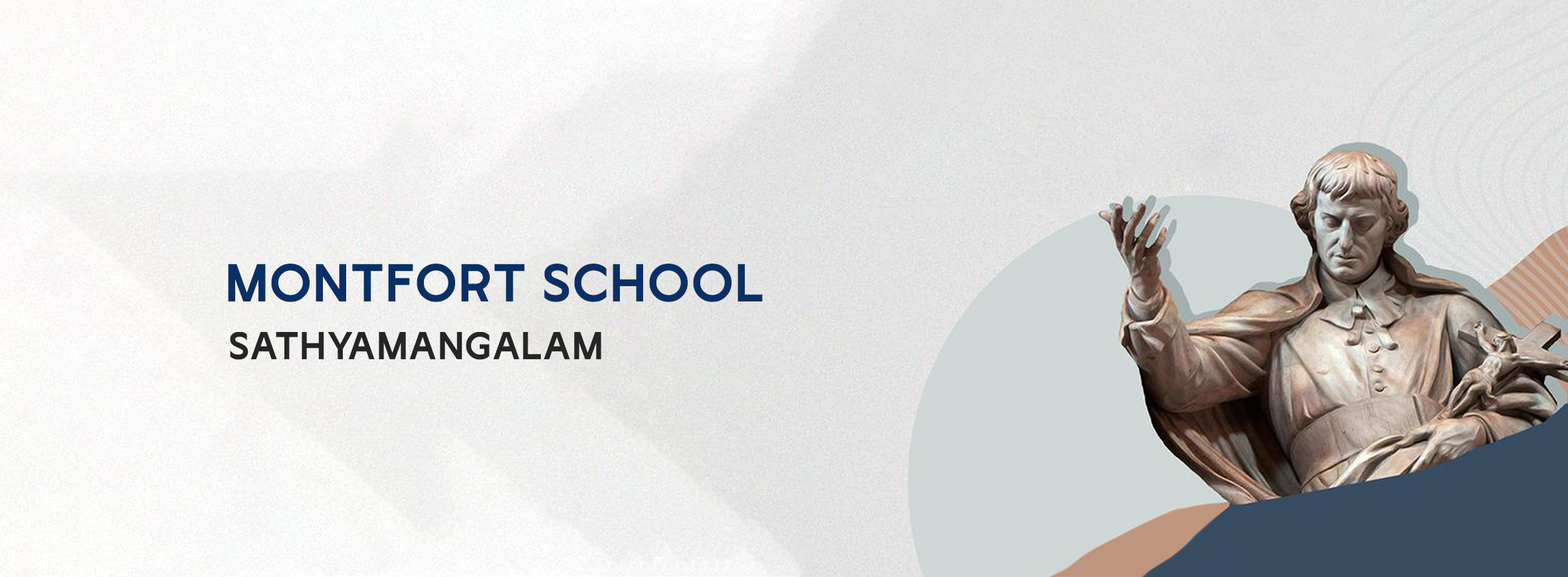
<style>
.page{position:relative;width:1568px;height:577px}
.page>*{position:absolute;margin:0}
.t1{font:49.8px "LuciferSans-SemiBold";letter-spacing:0.02em;color:#093066;text-transform:uppercase}
.t2{font:36.1px "LuciferSans-SemiBold";letter-spacing:0.02em;color:#252525;text-transform:uppercase}
</style>
<div class="page">
<p class="t1" style="left:228px;top:264px;width:535px;height:38px">Montfort School</p>
<p class="t2" style="left:230px;top:332px;width:371px;height:28px">Sathyamangalam</p>
</div>
